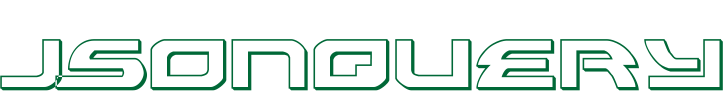
<style>
.page{position:relative;width:728px;height:105px;background:#ffffff}
.page>*{position:absolute;margin:0}
.t1{font:125px "Alexis3D";color:#006837}
</style>
<div class="page">
<p class="t1" style="left:0px;top:39px;width:723px;height:52px">JSONQUERY</p>
</div>
